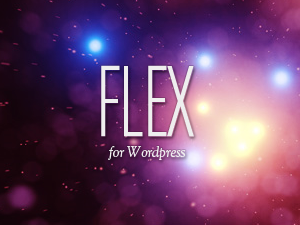
<style>
.page{position:relative;width:300px;height:225px}
.page>*{position:absolute;margin:0}
.t1{font:108.1px "ChaletComprime-MilanEighty";letter-spacing:-0.01em;color:#ffffff;text-transform:uppercase}
.t2{font:14px "OFLGoudyStM-Italic";letter-spacing:-0.01em;color:#ffffff}
</style>
<div class="page">
<p class="t1" style="left:101px;top:65px;width:93px;height:72px">FLEX</p>
<p class="t2" style="left:108px;top:146px;width:78px;height:14px">for Wordpress</p>
</div>
